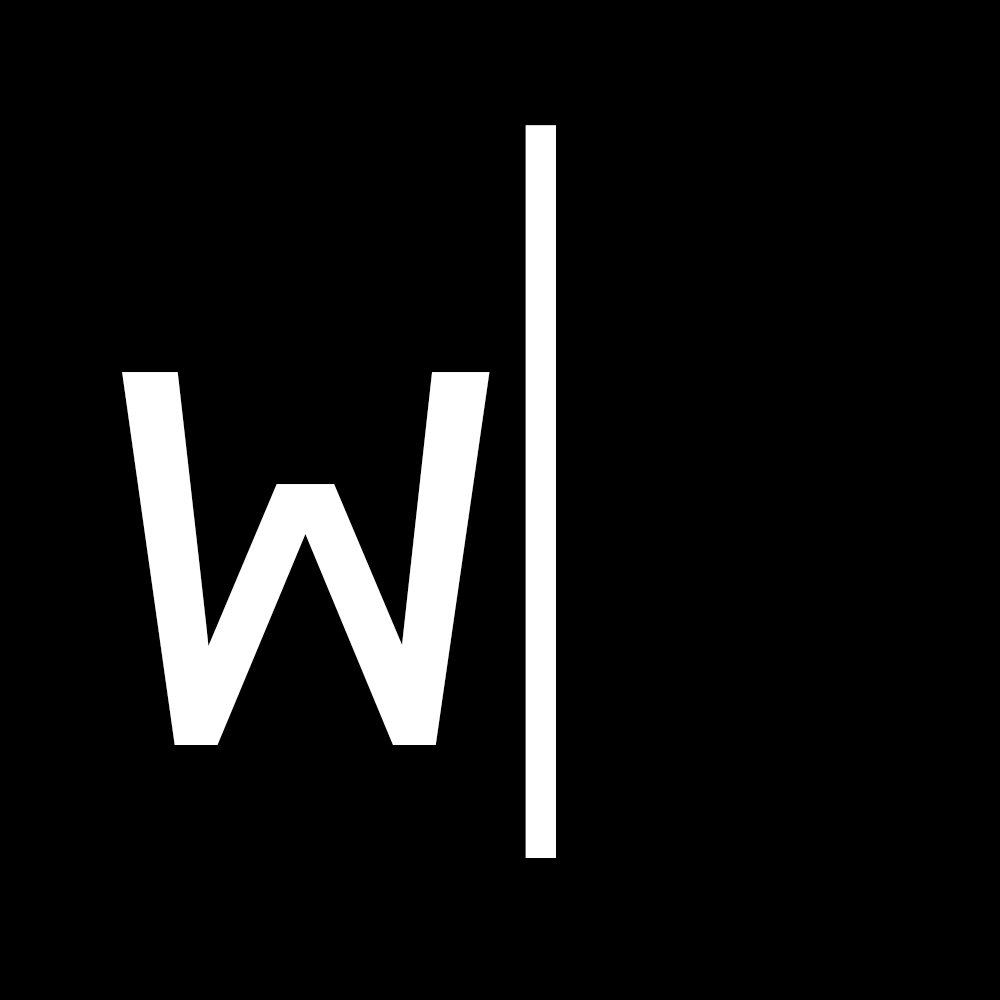
<style>
.page{position:relative;width:1000px;height:1000px;background:#000000}
.page>*{position:absolute;margin:0}
.t1{font:732.7px "MyriadPro-Regular";color:#ffffff;scale:0.62 1}
.t2{font:732.7px "AndaleMono";color:#ffffff}
</style>
<div class="page">
<p class="t1" style="left:525px;top:125px;width:31px;height:733px">|</p>
<p class="t2" style="left:122px;top:372px;width:368px;height:373px">w</p>
</div>
